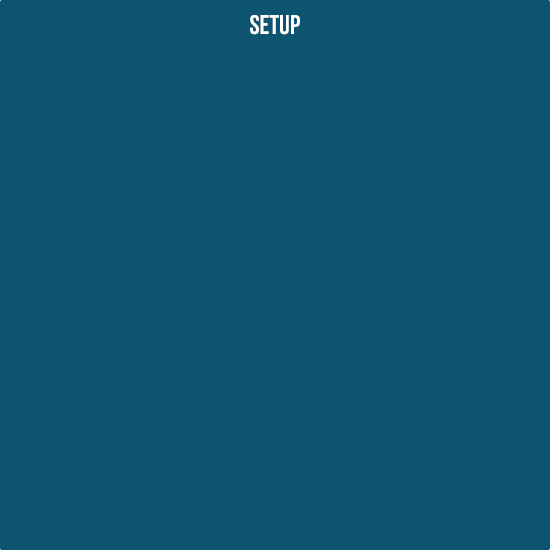
<style>
.page{position:relative;width:550px;height:550px;background:#0c5470}
.page>*{position:absolute;margin:0}
.t1{font:27px "UTM-Bebas";color:#ffffff}
</style>
<div class="page">
<p class="t1" style="left:250px;top:15px;width:50px;height:20px">setup</p>
</div>
